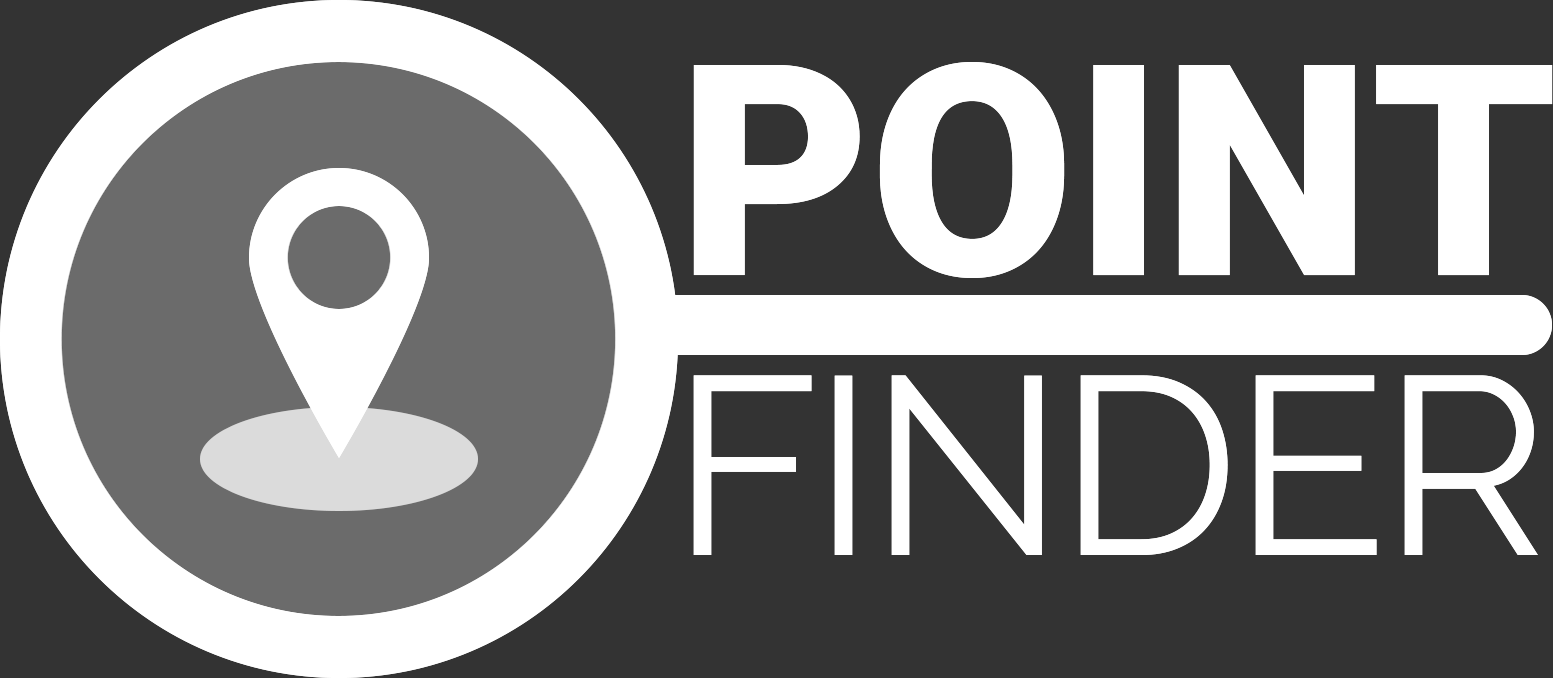
<style>
.page{position:relative;width:1553px;height:678px;background:#333333}
.page>*{position:absolute;margin:0}
.t1{font:295.7px "Roboto-Black";color:#ffffff}
.t2{font:252.7px "Raleway";letter-spacing:-0.025em;color:#ffffff}
</style>
<div class="page">
<p class="t1" style="left:693px;top:62px;width:860px;height:216px">POINT</p>
<p class="t2" style="left:693px;top:375px;width:845px;height:180px">FINDER</p>
</div>
